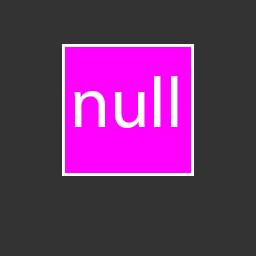
<style>
.page{position:relative;width:256px;height:256px;background:#333333}
.page>*{position:absolute;margin:0}
.t1{font:72px "MyriadPro-Regular";color:#ffffff}
</style>
<div class="page">
<p class="t1" style="left:74px;top:76px;width:104px;height:52px">null</p>
</div>
